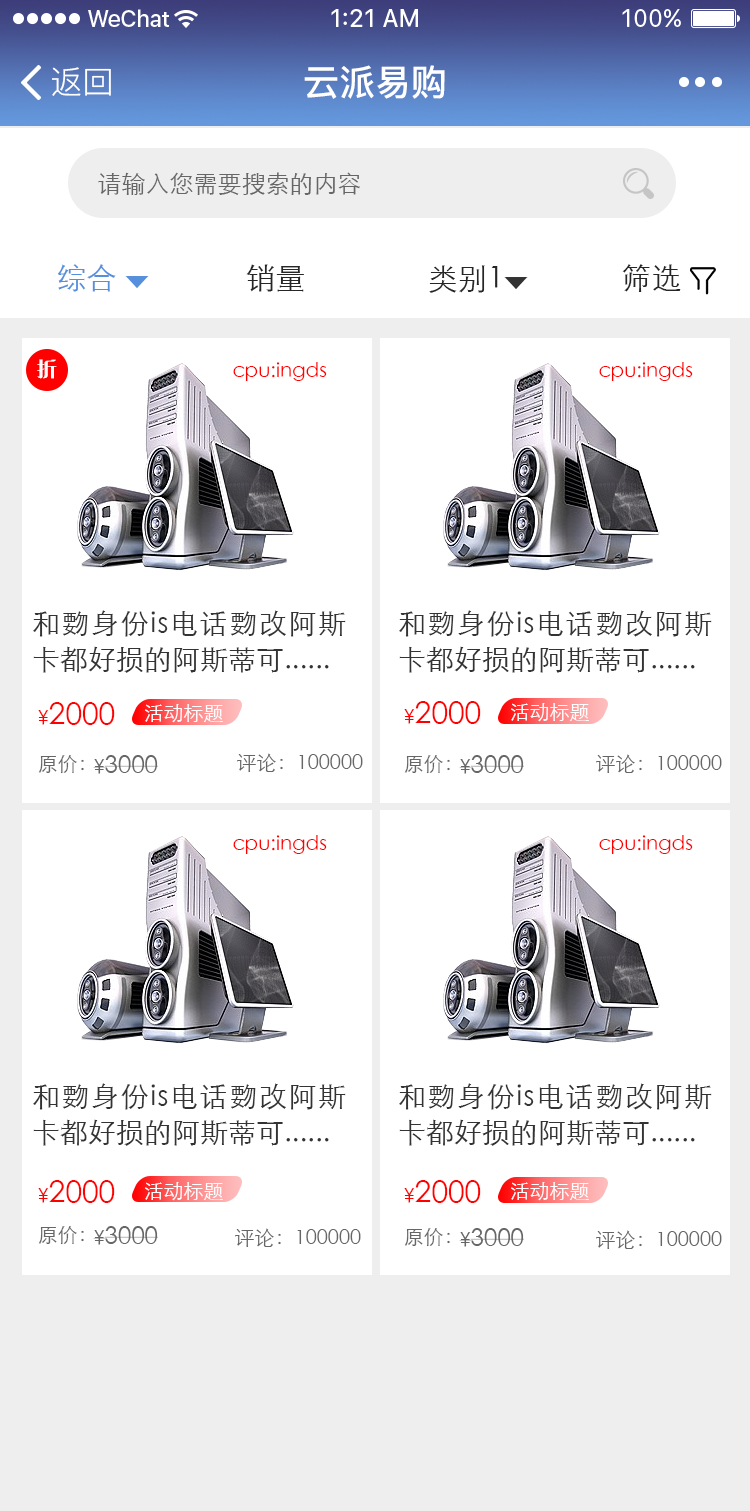
<style>
.page{position:relative;width:750px;height:1511px;background:#ffffff}
.page>*{position:absolute;margin:0}
.t1{font:36px "PingFang-SC-Bold";color:#ffffff}
.t2{font:32px "PingFang-SC-Regular";color:#ffffff}
.t3{font:24px "STXihei";color:#666666}
.t4{font:30px "STXihei";color:#568fdc}
.t5{font:30px "STXihei";color:#262626}
.t6{font:20px "FZCQJW--GB1-0";color:#ffffff}
.t7{font:20px "STXihei";color:#ff0000}
.t8{font:28px/36px "STXihei";color:#333333}
.t9{font:30px "STXihei";color:#ff0000}
.t10{font:20px "STXihei";color:#ffffff}
.t11{font:20px "STXihei";color:#666666}
</style>
<div class="page">
<p class="t1" style="left:304px;top:65px;width:141px;height:34px">云派易购</p>
<p class="t2" style="left:52px;top:67px;width:59px;height:29px">返回</p>
<p class="t3" style="left:98px;top:172px;width:262px;height:23px">请输入您需要搜索的内容</p>
<p class="t4" style="left:57px;top:264px;width:59px;height:28px">综合</p>
<p class="t5" style="left:246px;top:264px;width:58px;height:28px">销量</p>
<p class="t5" style="left:429px;top:265px;width:69px;height:28px">类别1</p>
<p class="t5" style="left:622px;top:264px;width:59px;height:28px">筛选</p>
<p class="t6" style="left:37px;top:359px;width:20px;height:20px">折</p>
<p class="t7" style="left:233px;top:362px;width:94px;height:19px">cpu:ingds</p>
<p class="t7" style="left:599px;top:362px;width:94px;height:19px">cpu:ingds</p>
<p class="t8" style="left:33px;top:610px;width:313px;height:63px;text-align:justify">和覅身份is电话覅改阿斯卡都好损的阿斯蒂可......</p>
<p class="t8" style="left:399px;top:610px;width:313px;height:63px;text-align:justify">和覅身份is电话覅改阿斯卡都好损的阿斯蒂可......</p>
<p class="t9" style="left:38px;top:702px;width:77px;height:23px"><span class="t7">¥</span>2000</p>
<p class="t9" style="left:404px;top:701px;width:77px;height:23px"><span class="t7">¥</span>2000</p>
<p class="t10" style="left:145px;top:704px;width:78px;height:19px">活动标题</p>
<p class="t10" style="left:511px;top:703px;width:78px;height:19px">活动标题</p>
<p class="t11" style="left:38px;top:755px;width:46px;height:19px">原价：</p>
<p class="t3" style="left:93px;top:755px;width:65px;height:19px"><span class="t11">¥</span>3000</p>
<p class="t11" style="left:237px;top:753px;width:126px;height:19px">评论：100000</p>
<p class="t11" style="left:404px;top:755px;width:46px;height:19px">原价：</p>
<p class="t3" style="left:459px;top:755px;width:65px;height:19px"><span class="t11">¥</span>3000</p>
<p class="t11" style="left:596px;top:754px;width:126px;height:19px">评论：100000</p>
<p class="t7" style="left:233px;top:835px;width:94px;height:19px">cpu:ingds</p>
<p class="t7" style="left:599px;top:835px;width:94px;height:19px">cpu:ingds</p>
<p class="t8" style="left:33px;top:1083px;width:313px;height:63px;text-align:justify">和覅身份is电话覅改阿斯卡都好损的阿斯蒂可......</p>
<p class="t8" style="left:399px;top:1083px;width:313px;height:63px;text-align:justify">和覅身份is电话覅改阿斯卡都好损的阿斯蒂可......</p>
<p class="t9" style="left:38px;top:1180px;width:77px;height:23px"><span class="t7">¥</span>2000</p>
<p class="t10" style="left:145px;top:1182px;width:78px;height:19px">活动标题</p>
<p class="t9" style="left:404px;top:1180px;width:77px;height:23px"><span class="t7">¥</span>2000</p>
<p class="t10" style="left:511px;top:1182px;width:78px;height:19px">活动标题</p>
<p class="t11" style="left:38px;top:1226px;width:46px;height:19px">原价：</p>
<p class="t3" style="left:93px;top:1226px;width:65px;height:19px"><span class="t11">¥</span>3000</p>
<p class="t11" style="left:235px;top:1228px;width:126px;height:19px">评论：100000</p>
<p class="t11" style="left:404px;top:1228px;width:46px;height:19px">原价：</p>
<p class="t3" style="left:459px;top:1228px;width:65px;height:19px"><span class="t11">¥</span>3000</p>
<p class="t11" style="left:596px;top:1230px;width:126px;height:19px">评论：100000</p>
</div>
